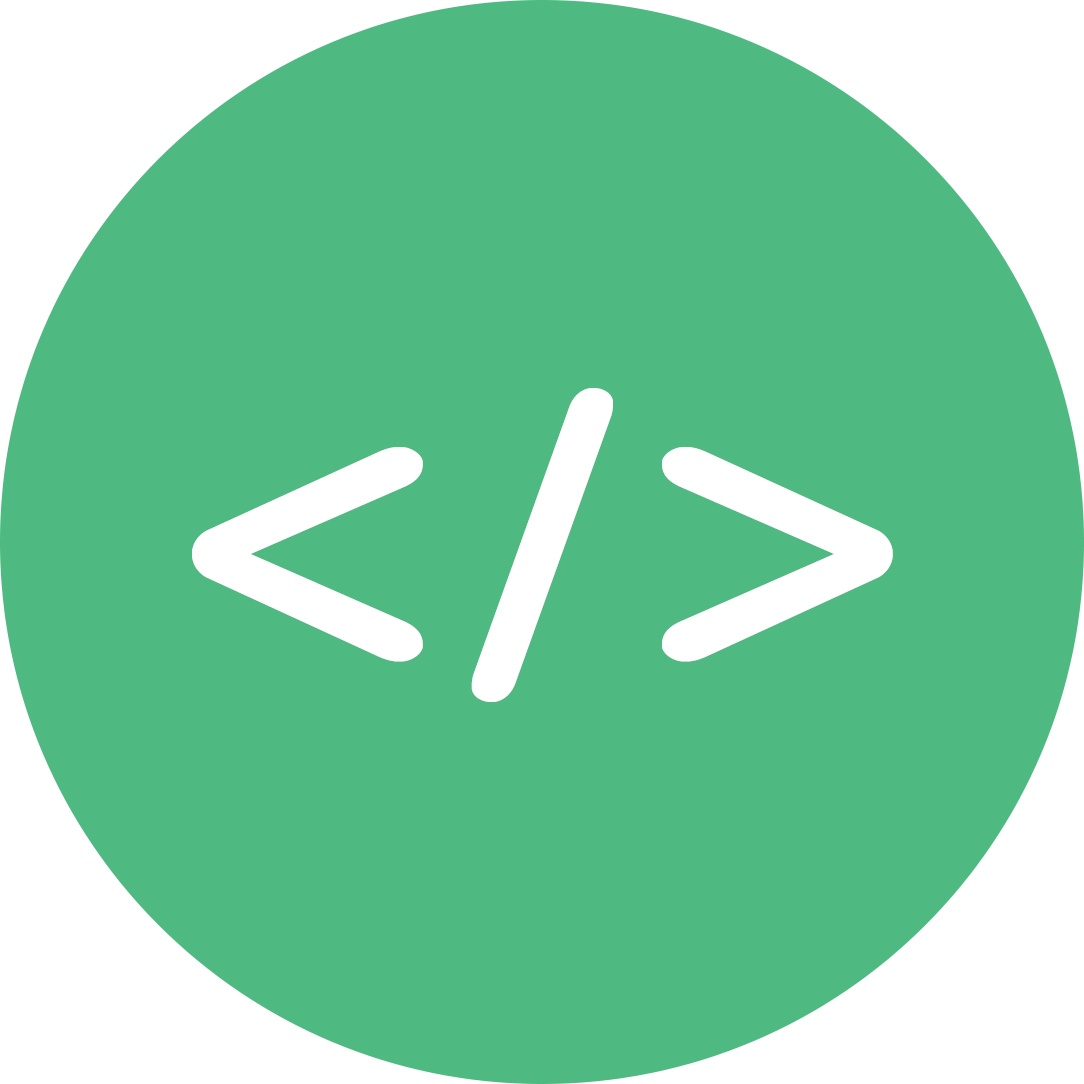
<style>
.page{position:relative;width:1084px;height:1084px;background:#4eb980}
.page>*{position:absolute;margin:0}
.t1{font:416.7px "HelveticaRoundedLTPro-BdCn";letter-spacing:0.145em;color:#ffffff}
</style>
<div class="page">
<p class="t1" style="left:471px;top:388px;width:142px;height:314px">/</p>
<p class="t1" style="left:192px;top:447px;width:701px;height:215px">&lt; &gt;</p>
</div>
